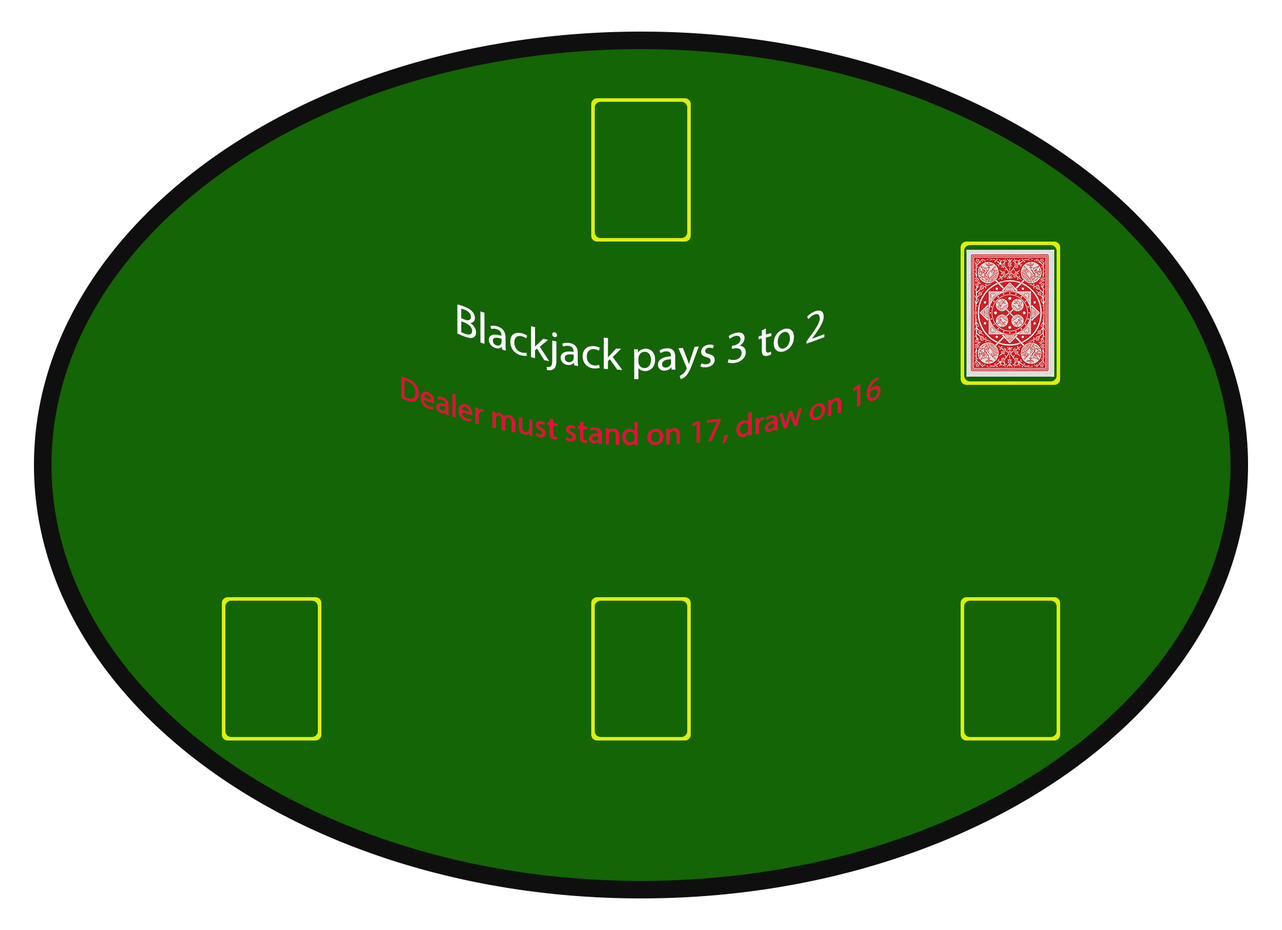
<style>
.page{position:relative;width:1282px;height:930px;background:#146505}
.page>*{position:absolute;margin:0}
.t1{font:43.9px "MyriadPro-Regular";color:#ffffff}
.t2{font:31.7px "MyriadPro-Regular";color:#ff0040}
</style>
<div class="page">
<p class="t1" style="left:457px;top:304px;width:368px;height:76px">Blackjack pays 3 to 2</p>
<p class="t2" style="left:401px;top:377px;width:479px;height:68px">Dealer must stand on 17, draw on 16</p>
</div>
